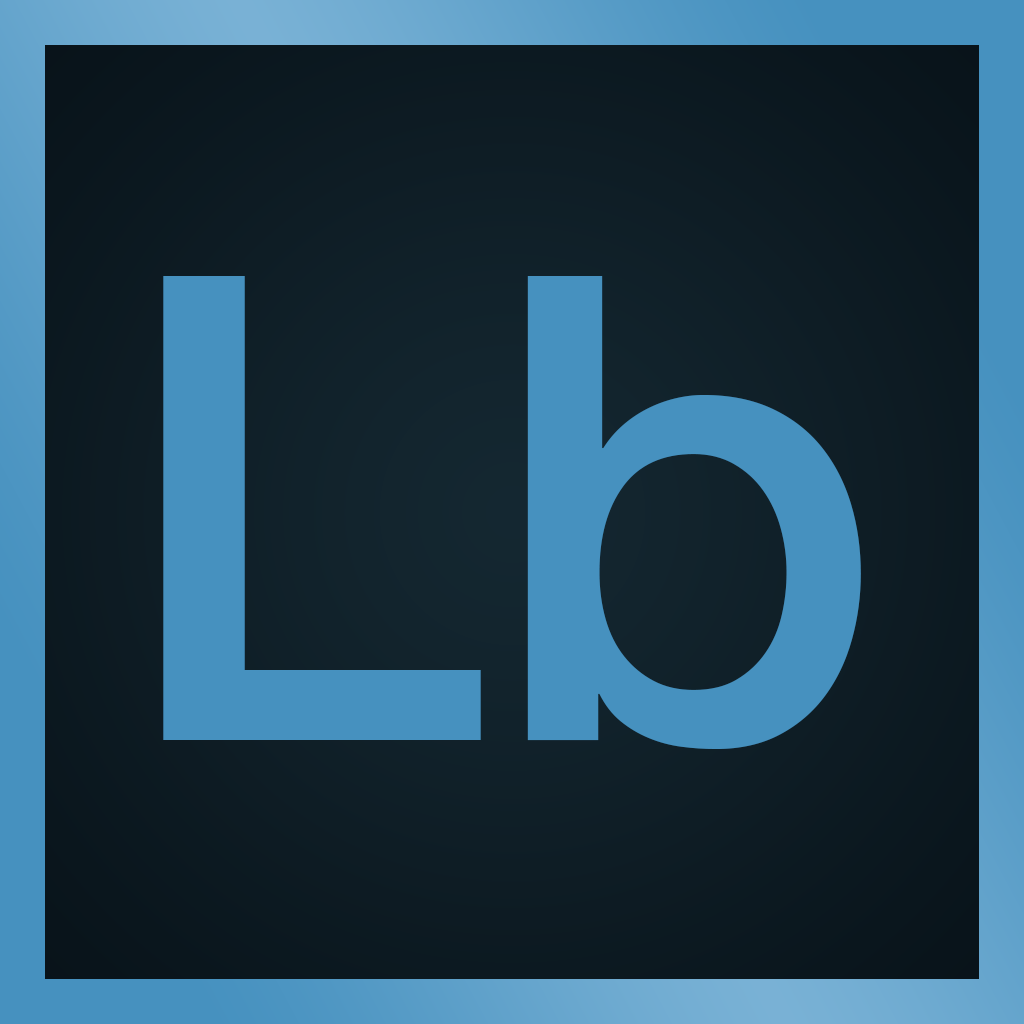
<style>
.page{position:relative;width:1024px;height:1024px}
.page>*{position:absolute;margin:0}
.t1{font:650px "HelveticaNeue-Medium";color:#4691bf}
</style>
<div class="page">
<p class="t1" style="left:163px;top:276px;width:698px;height:473px">Lb</p>
</div>
